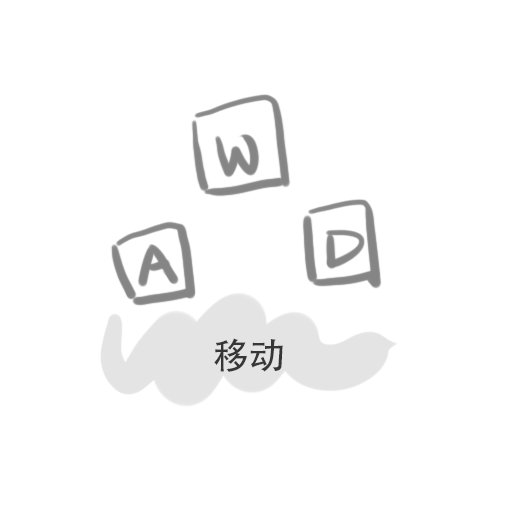
<style>
.page{position:relative;width:512px;height:512px;background:#ffffff}
.page>*{position:absolute;margin:0}
.t1{font:36px "AdobeHeitiStd-Regular";color:#363636}
</style>
<div class="page">
<p class="t1" style="left:214px;top:338px;width:69px;height:34px">移动</p>
</div>
